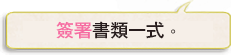
<style>
.page{position:relative;width:231px;height:55px;background:#f6efe8}
.page>*{position:absolute;margin:0}
.t1{font:18px "GothicMB101Pr6N-Medium";color:#271c1c}
.t2{font:18px "GothicMB101Pr6N-Medium";color:#f66ca2}
.t3{font:18px "DFKaiShu-SB-Estd-BF";color:#271c1c}
</style>
<div class="page">
<p class="t1" style="left:56px;top:21px;width:120px;height:18px"><span class="t2">簽署</span>書類一式<span class="t3">。</span></p>
</div>
